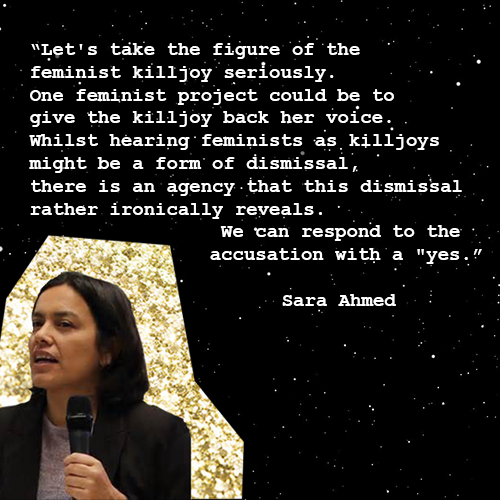
<style>
.page{position:relative;width:500px;height:500px;background:#000000}
.page>*{position:absolute;margin:0}
.t1{font:19px "CourierNewPS-BoldMT";color:#ffffff}
</style>
<div class="page">
<p class="t1" style="left:29px;top:43px;width:453px;height:263px">“Let's take the figure of the <br>feminist killjoy seriously. <br>One feminist project could be to <br>give the killjoy back her voice. <br>Whilst hearing feminists as killjoys <br>might be a form of dismissal, <br>there is an agency that this dismissal <br>rather ironically reveals.<br>      We can respond to the <br>     accusation with a "yes.”<br><br>       Sara Ahmed</p>
</div>
